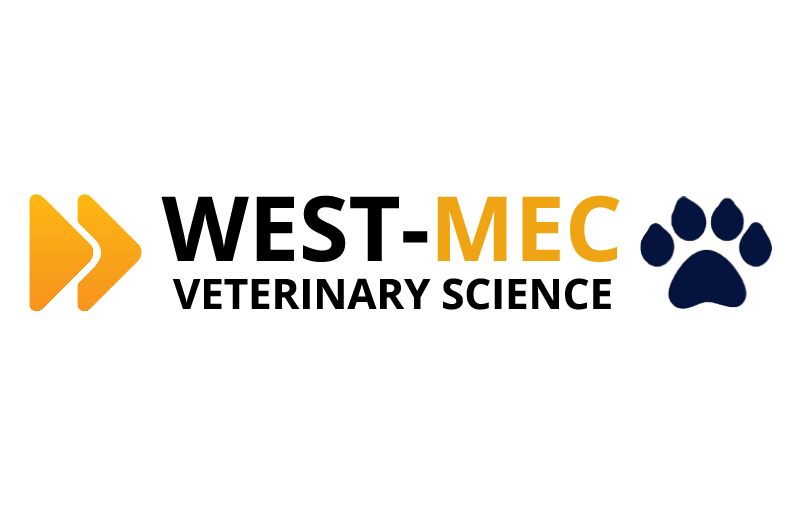
<style>
.page{position:relative;width:800px;height:531px;background:#ffffff}
.page>*{position:absolute;margin:0}
.t1{font:90px "OpenSans-Bold";color:#000000;text-transform:uppercase}
.t2{font:90px "OpenSans-Bold";color:#efa414;text-transform:uppercase}
.t3{font:42px "OpenSans-Bold";color:#000000;text-transform:uppercase}
</style>
<div class="page">
<p class="t1" style="left:161px;top:195px;width:459px;height:67px">West-<span class="t2">Mec</span></p>
<p class="t3" style="left:172px;top:278px;width:439px;height:32px">veterinary science</p>
</div>
